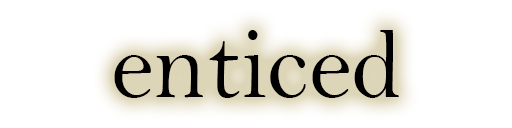
<style>
.page{position:relative;width:512px;height:128px;background:#ffffff}
.page>*{position:absolute;margin:0}
.t1{font:100px "BellMT";color:#000000}
</style>
<div class="page">
<p class="t1" style="left:114px;top:30px;width:285px;height:68px">enticed</p>
</div>
